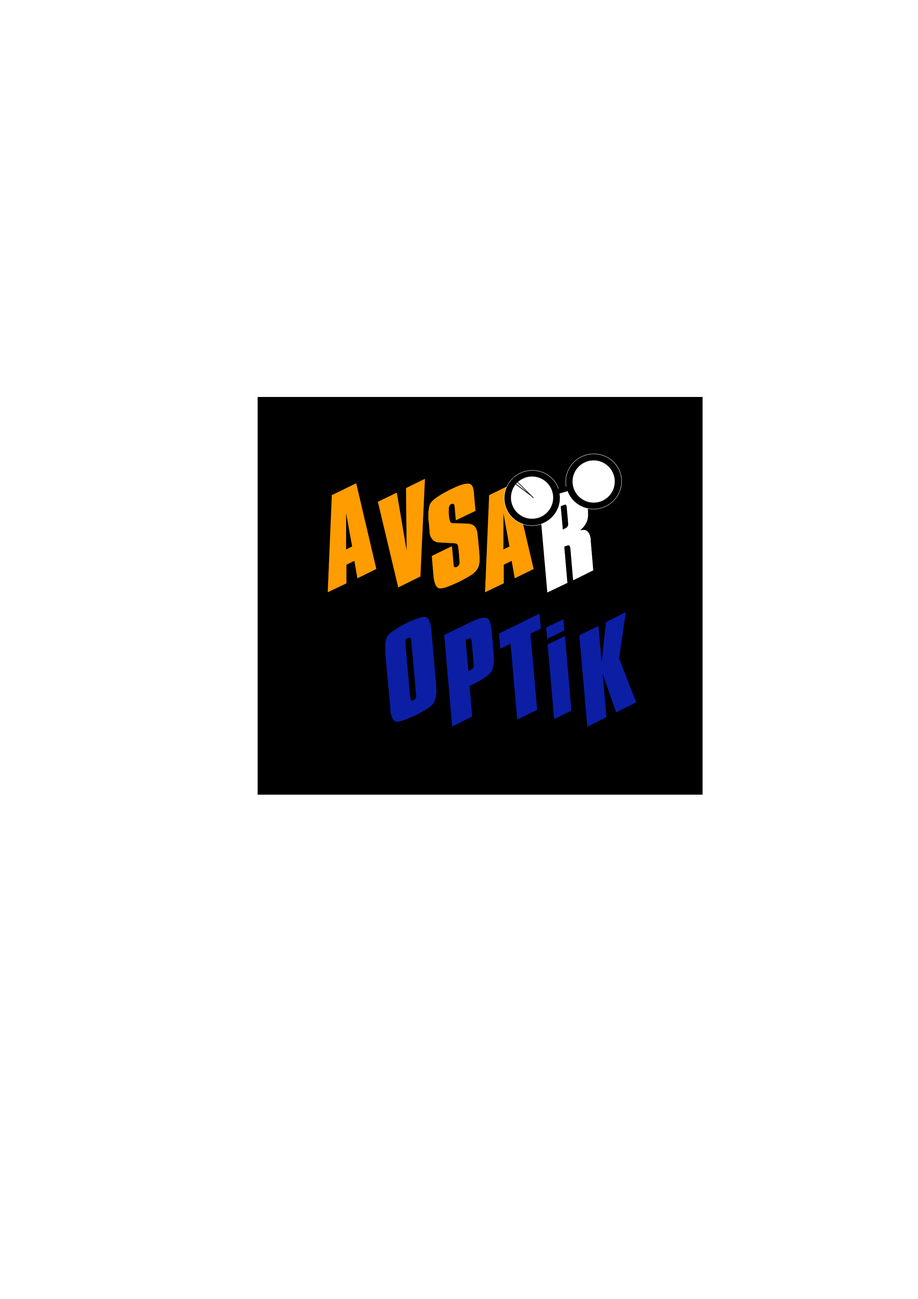
<style>
.page{position:relative;width:918px;height:1299px;background:#ffffff}
.page>*{position:absolute;margin:0}
.t1{font:111.1px "Spund";color:#0c1ea4}
.t2{font:111.1px "Spund";color:#ff9c00}
.t3{font:111.1px "Spund";color:#ffffff}
</style>
<div class="page">
<p class="t1" style="left:328px;top:479px;width:308px;height:248px"><span class="t2">AVSA</span><span class="t3">R<br> </span>OPTiK</p>
</div>
